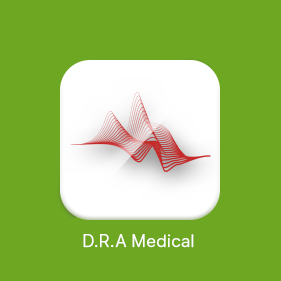
<style>
.page{position:relative;width:281px;height:281px;background:#6ea722}
.page>*{position:absolute;margin:0}
.t1{font:17px "SFUIText-Light";color:#ffffff;font-weight:bold}
</style>
<div class="page">
<p class="t1" style="left:83px;top:234px;width:111px;height:14px">D.R.A Medical</p>
</div>
